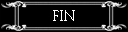
<style>
.page{position:relative;width:128px;height:32px;background:#000000}
.page>*{position:absolute;margin:0}
.t1{font:14px "TrajanPro-Regular";letter-spacing:-0.1em;color:#ffffff}
</style>
<div class="page">
<p class="t1" style="left:53px;top:10px;width:22px;height:11px">FIN</p>
</div>
